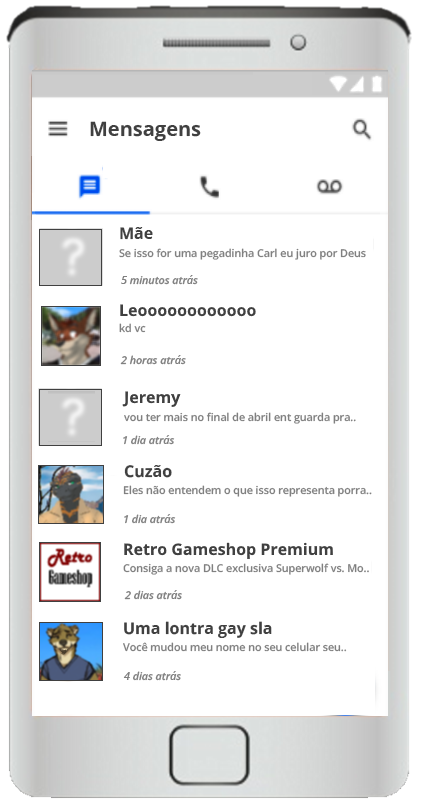
<style>
.page{position:relative;width:421px;height:800px;background:#ffffff}
.page>*{position:absolute;margin:0}
.t1{font:20px "OpenSansRoman-Bold";color:#404040}
.t2{font:16px "OpenSansRoman-Bold";color:#404040}
.t3{font:10.7px "OpenSansRoman-SemiBold";color:#808080}
.t4{font:10.7px "OpenSansItalic-SemiBoldItalic";color:#808080}
</style>
<div class="page">
<p class="t1" style="left:90px;top:121px;width:111px;height:20px">Mensagens</p>
<p class="t2" style="left:120px;top:227px;width:33px;height:13px">Mãe</p>
<p class="t3" style="left:119px;top:248px;width:247px;height:12px">Se isso for uma pegadinha Carl eu juro por Deus</p>
<p class="t4" style="left:121px;top:275px;width:77px;height:10px">5 minutos atrás</p>
<p class="t3" style="left:119px;top:323px;width:27px;height:10px">kd vc</p>
<p class="t4" style="left:120px;top:355px;width:66px;height:10px">2 horas atrás</p>
<p class="t3" style="left:124px;top:412px;width:232px;height:12px">vou ter mais no final de abril ent guarda pra..</p>
<p class="t4" style="left:123px;top:435px;width:52px;height:10px">1 dia atrás</p>
<p class="t2" style="left:124px;top:465px;width:48px;height:13px">Cuzão</p>
<p class="t3" style="left:123px;top:485px;width:249px;height:12px">Eles não entendem o que isso representa porra..</p>
<p class="t4" style="left:124px;top:514px;width:52px;height:10px">1 dia atrás</p>
<p class="t3" style="left:123px;top:563px;width:246px;height:12px">Consiga a nova DLC exclusiva Superwolf vs. Mo..</p>
<p class="t4" style="left:124px;top:590px;width:58px;height:10px">2 dias atrás</p>
<p class="t2" style="left:124px;top:621px;width:148px;height:17px">Uma lontra gay sla</p>
<p class="t3" style="left:123px;top:642px;width:224px;height:10px">Você mudou meu nome no seu celular seu..</p>
<p class="t4" style="left:123px;top:671px;width:58px;height:10px">4 dias atrás</p>
</div>
